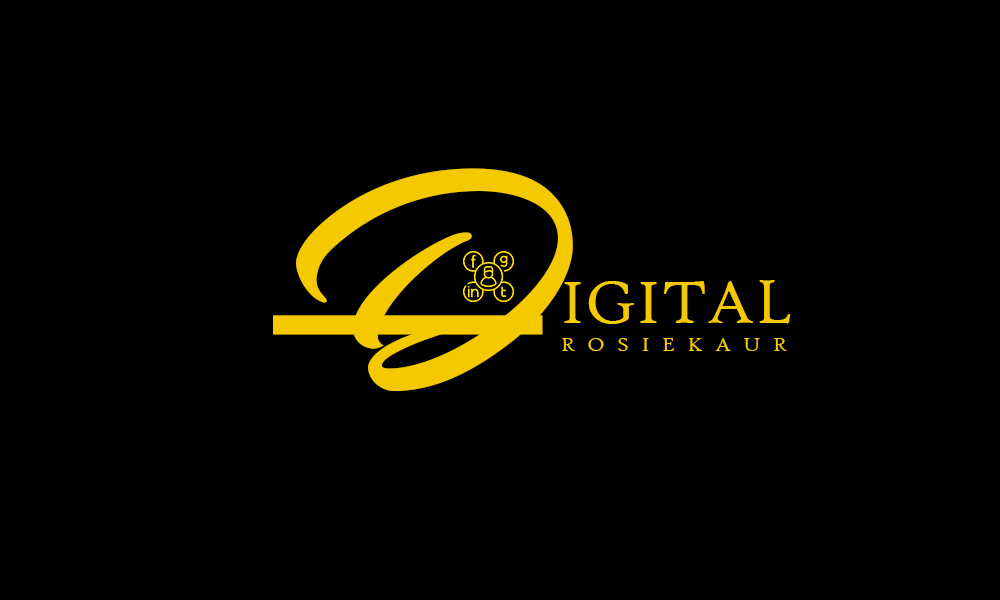
<style>
.page{position:relative;width:1000px;height:600px;background:#000000}
.page>*{position:absolute;margin:0}
.t1{font:381px "AlpineScript-Regular";color:#f5ca00;text-transform:uppercase}
.t2{font:63.5px "HighTowerText-Reg";color:#f5ca00;text-transform:uppercase}
.t3{font:21.2px "HighTowerText-Reg";letter-spacing:0.58em;color:#f5ca00;text-transform:uppercase}
</style>
<div class="page">
<p class="t1" style="left:273px;top:168px;width:300px;height:223px">D</p>
<p class="t2" style="left:564px;top:280px;width:227px;height:44px">igital</p>
<p class="t3" style="left:562px;top:338px;width:225px;height:13px">RosieKaur</p>
</div>
